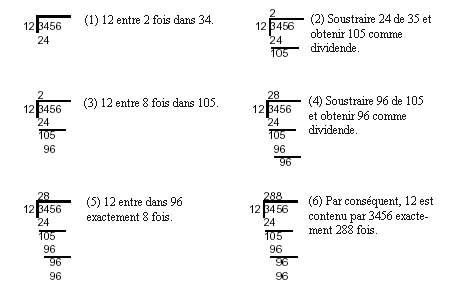
<style>
.page{position:relative;width:452px;height:292px;background:#ffffff}
.page>*{position:absolute;margin:0}
.t1{font:12px "TimesNewRomanPSMT";color:#1a1a1a}
</style>
<div class="page">
<p class="t1" style="left:85px;top:15px;width:128px;height:11px">(1) 12 entre 2 fois dans 34.</p>
<p class="t1" style="left:311px;top:14px;width:120px;height:38px">(2) Soustraire 24 de 35 et obtenir 105 comme dividende.</p>
<p class="t1" style="left:84px;top:98px;width:134px;height:11px">(3) 12 entre 8 fois dans 105.</p>
<p class="t1" style="left:309px;top:96px;width:114px;height:38px">(4) Soustraire 96 de 105 et obtenir 96 comme dividende.</p>
<p class="t1" style="left:87px;top:197px;width:95px;height:24px">(5) 12 entre dans 96 exactement 8 fois.</p>
<p class="t1" style="left:309px;top:196px;width:124px;height:38px">(6) Par conséquent, 12 est contenu par 3456 exactement 288 fois.</p>
</div>
